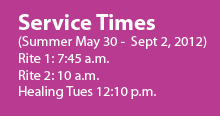
<style>
.page{position:relative;width:220px;height:116px;background:#b83a91}
.page>*{position:absolute;margin:0}
.t1{font:13.9px "MyriadPro-Regular";color:#fefefe}
.t2{font:22.5px "MyriadPro-Bold";color:#fefefe}
</style>
<div class="page">
<p class="t1" style="left:18px;top:14px;width:189px;height:85px"><span class="t2">Service Times <br></span>(Summer May 30 -  Sept 2, 2012)<br>Rite 1: 7:45 a.m.<br>Rite 2: 10 a.m.<br>Healing Tues 12:10 p.m.</p>
<p class="t1" style="left:18px;top:14px;width:189px;height:85px"><span class="t2">Service Times <br></span>(Summer May 30 -  Sept 2, 2012)<br>Rite 1: 7:45 a.m.<br>Rite 2: 10 a.m.<br>Healing Tues 12:10 p.m.</p>
</div>
